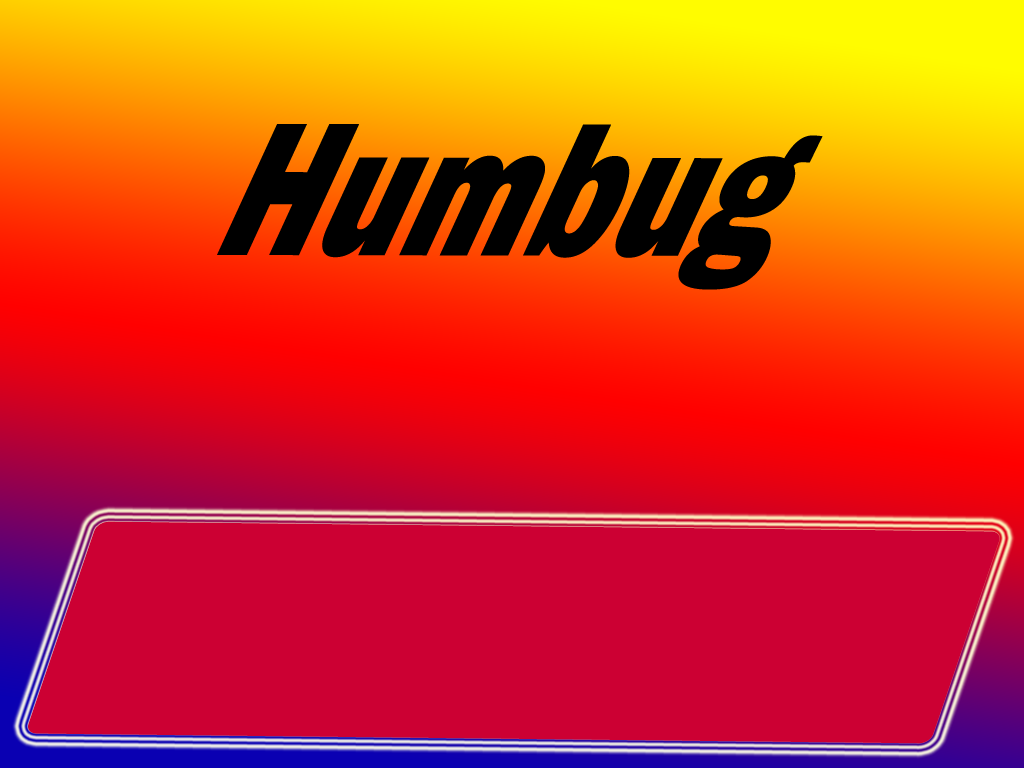
<style>
.page{position:relative;width:1024px;height:768px;background:#cc0033}
.page>*{position:absolute;margin:0}
.t1{font:215.9px "FranklinGothic-Heavy";color:#000000;scale:0.67 1}
</style>
<div class="page">
<p class="t1" style="left:217px;top:124px;width:606px;height:166px">Humbug</p>
</div>
